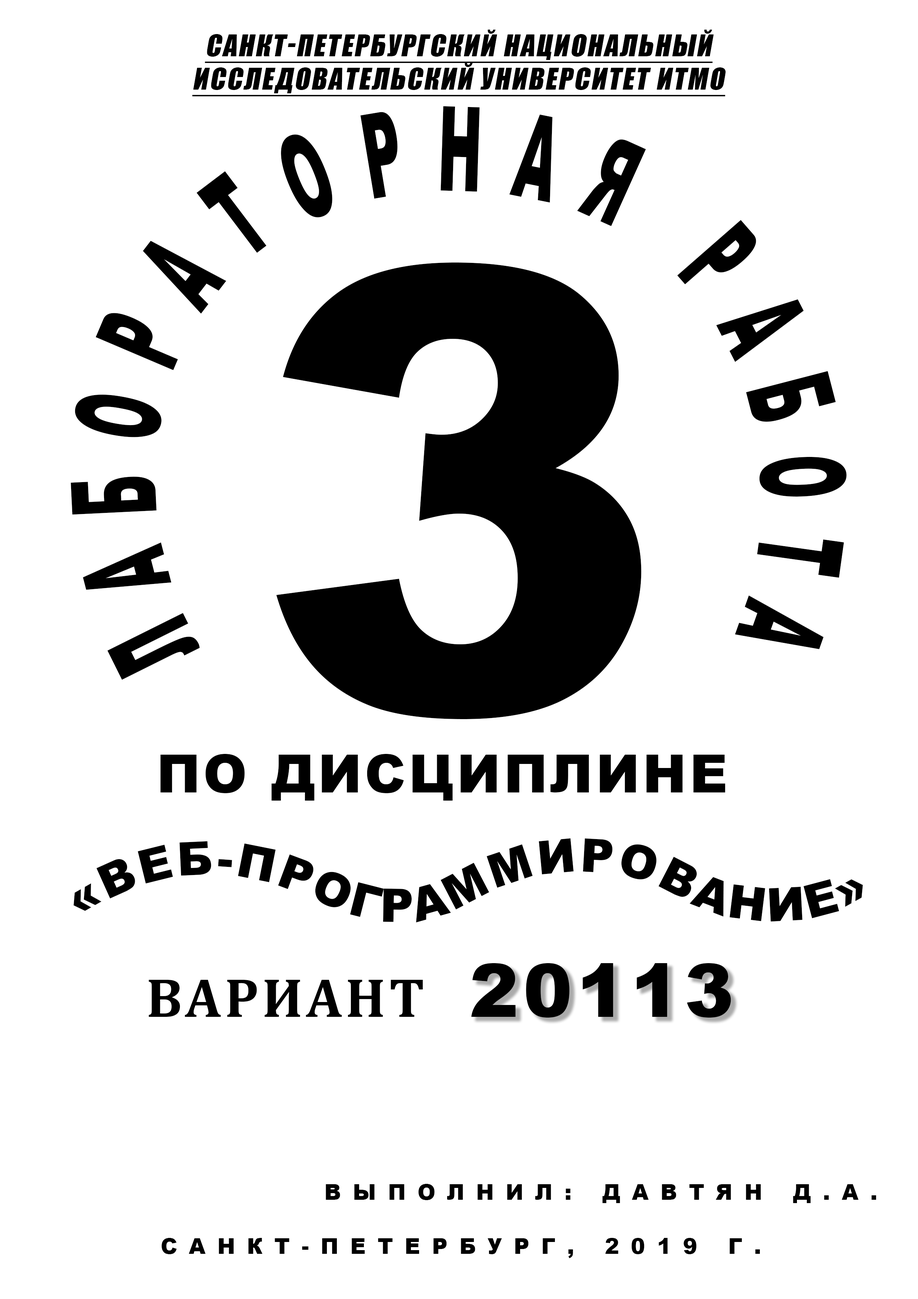
<style>
.page{position:relative;width:918px;height:1299px;background:#ffffff}
.page>*{position:absolute;margin:0}
.t1{font:27.8px "Impact";letter-spacing:0.06em;color:#000000;text-transform:uppercase;font-style:italic;text-decoration:underline}
.t2{font:117.7px "Arial-Black";letter-spacing:0.54em;color:#000000;text-transform:uppercase;scale:0.45 1}
.t3{font:617px "Arial-Black";letter-spacing:0.06em;color:#000000;text-transform:uppercase}
.t4{font:52.4px "Arial-Black";letter-spacing:0.06em;color:#000000;text-transform:uppercase}
.t5{font:46.3px "Arial-Black";letter-spacing:0.06em;color:#000000;text-transform:uppercase}
.t6{font:74px "Arial-Black";letter-spacing:0.06em;color:#000000;text-transform:uppercase}
.t7{font:55.5px "Cambria-Bold";letter-spacing:0.06em;color:#000000;text-transform:uppercase}
.t8{font:21.6px "Arial-Black";letter-spacing:0.54em;color:#000000;text-transform:uppercase}
</style>
<div class="page">
<p class="t1" style="left:192px;top:30px;width:534px;height:67px;text-align:center">Санкт-Петербургский Национальный<br>Исследовательский Университет ИТМО</p>
<p class="t2" style="left:71px;top:106px;width:776px;height:574px;text-align:center">лабораторная работа<br>аб</p>
<p class="t3" style="left:276px;top:262px;width:366px;height:457px">3</p>
<p class="t4" style="left:160px;top:754px;width:565px;height:46px">по дисциплине</p>
<p class="t5" style="left:73px;top:838px;width:790px;height:84px;text-align:center">«Веб-программирование»</p>
<p class="t6" style="left:471px;top:963px;width:260px;height:54px">20113</p>
<p class="t7" style="left:149px;top:980px;width:274px;height:37px">вариант</p>
<p class="t8" style="left:326px;top:1184px;width:550px;height:19px">Выполнил: Давтян Д.А.</p>
<p class="t8" style="left:161px;top:1238px;width:599px;height:20px">санкт-петербург, 2019 г.</p>
</div>
